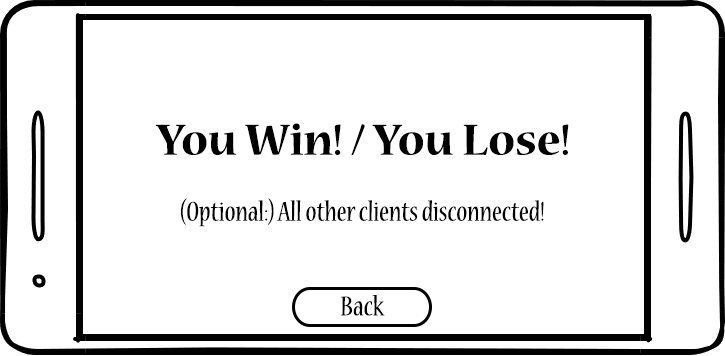
<style>
.page{position:relative;width:725px;height:356px;background:#ffffff}
.page>*{position:absolute;margin:0}
.t1{font:48px "NuevaStd-Bold";color:#000000}
.t2{font:30px "NuevaStd-Cond";color:#000000}
</style>
<div class="page">
<p class="t1" style="left:155px;top:123px;width:414px;height:33px">You Win! / You Lose!</p>
<p class="t2" style="left:181px;top:198px;width:363px;height:29px">(Optional:) All other clients disconnected!</p>
<p class="t2" style="left:340px;top:295px;width:45px;height:21px">Back</p>
</div>
